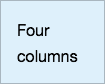
<style>
.page{position:relative;width:105px;height:84px;background:#def0fb}
.page>*{position:absolute;margin:0}
.t1{font:12px "MyriadPro-Regular";color:#0a0a0a}
</style>
<div class="page">
<p class="t1" style="left:17px;top:24px;width:61px;height:39px">Four columns</p>
</div>
